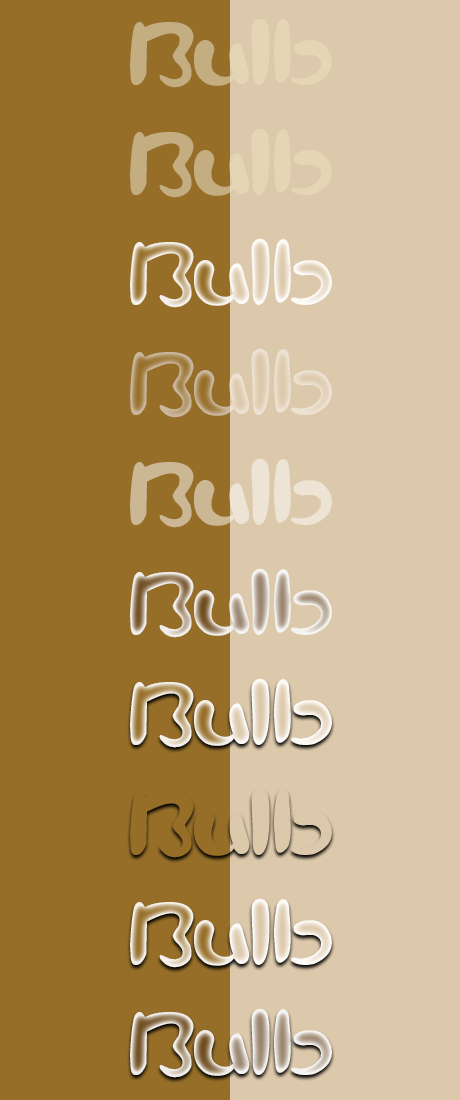
<style>
.page{position:relative;width:460px;height:1100px;background:#966e28}
.page>*{position:absolute;margin:0}
.t1{font:90px "Pikmin"}
</style>
<div class="page">
<p class="t1" style="left:130px;top:18px;width:202px;height:70px">Bulb</p>
<p class="t1" style="left:130px;top:128px;width:202px;height:70px">Bulb</p>
<p class="t1" style="left:130px;top:238px;width:202px;height:70px">Bulb</p>
<p class="t1" style="left:130px;top:348px;width:202px;height:70px">Bulb</p>
<p class="t1" style="left:130px;top:458px;width:202px;height:70px">Bulb</p>
<p class="t1" style="left:130px;top:568px;width:202px;height:70px">Bulb</p>
<p class="t1" style="left:130px;top:678px;width:202px;height:70px">Bulb</p>
<p class="t1" style="left:130px;top:1008px;width:202px;height:70px">Bulb</p>
</div>
